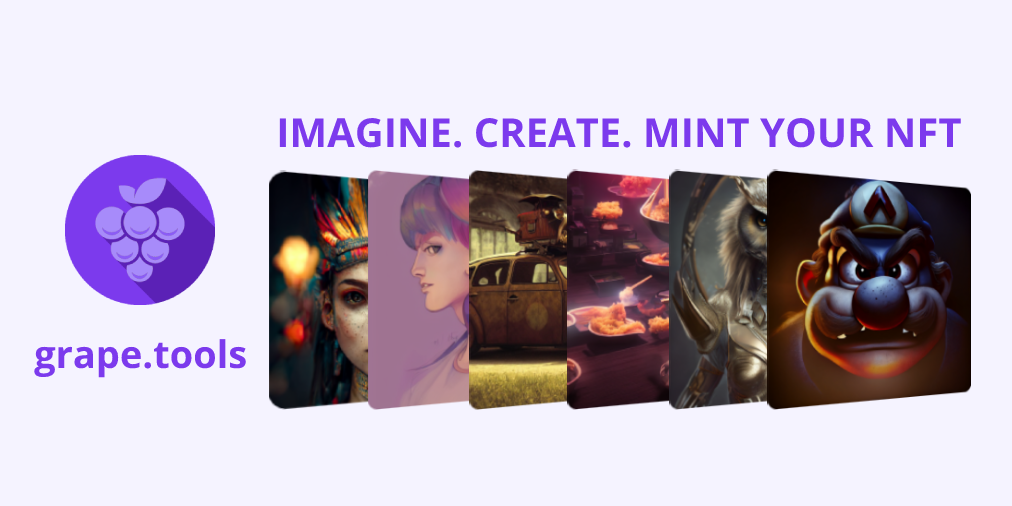
<style>
.page{position:relative;width:1012px;height:506px;background:#f5f3ff}
.page>*{position:absolute;margin:0}
.t1{font:40px "OpenSans-Bold";color:#7c3aed}
.t2{font:38px "OpenSans-Bold";color:#7c3aed}
</style>
<div class="page">
<p class="t1" style="left:279px;top:117px;width:682px;height:31px">IMAGINE. CREATE. MINT YOUR NFT</p>
<p class="t2" style="left:34px;top:339px;width:212px;height:39px">grape.tools</p>
</div>
